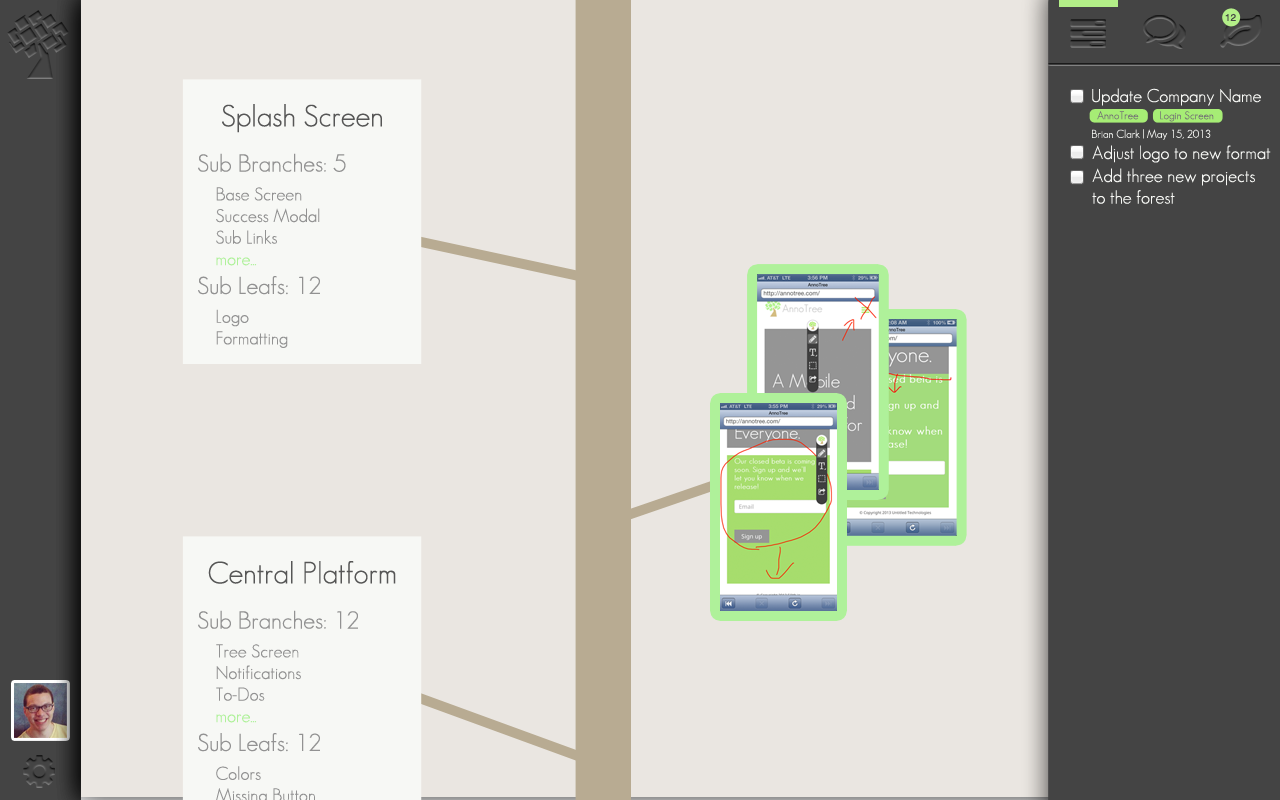
<style>
.page{position:relative;width:1280px;height:800px;background:#eae6e1}
.page>*{position:absolute;margin:0}
.t1{font:10px "Helvetica";color:#444444}
.t2{font:18px "GeosansLight";color:#f7f8f5}
.t3{font:30px "GeosansLight";color:#565656}
.t4{font:11px "GeosansLight";color:#747474}
.t5{font:11px "GeosansLight";color:#f7f8f5}
.t6{font:18px "GeosansLight";color:#929292}
.t7{font:24px "GeosansLight";color:#929292}
.t8{font:18px "GeosansLight";color:#aff19a}
</style>
<div class="page">
<p class="t1" style="left:1225px;top:13px;width:11px;height:8px">12</p>
<p class="t2" style="left:1092px;top:88px;width:169px;height:18px">Update Company Name</p>
<p class="t3" style="left:222px;top:104px;width:160px;height:29px">Splash Screen</p>
<p class="t4" style="left:1097px;top:111px;width:42px;height:9px">AnnoTree</p>
<p class="t4" style="left:1160px;top:111px;width:54px;height:11px">Login Screen</p>
<p class="t5" style="left:1092px;top:129px;width:119px;height:11px">Brian Clark | May 15, 2013</p>
<p class="t2" style="left:1092px;top:145px;width:179px;height:18px">Adjust logo to new format</p>
<p class="t6" style="left:198px;top:153px;width:148px;height:195px"><span class="t7">Sub Branches: 5<br>   </span>Base Screen<br>    Success Modal<br>    Sub Links<br>   <span class="t8"> more...<br></span><span class="t7">Sub Leafs: 12<br>   </span>Logo<br>    Formatting</p>
<p class="t2" style="left:1092px;top:168px;width:163px;height:36px">Add three new projects <br>to the forest</p>
<p class="t3" style="left:208px;top:561px;width:188px;height:23px">Central Platform</p>
</div>
